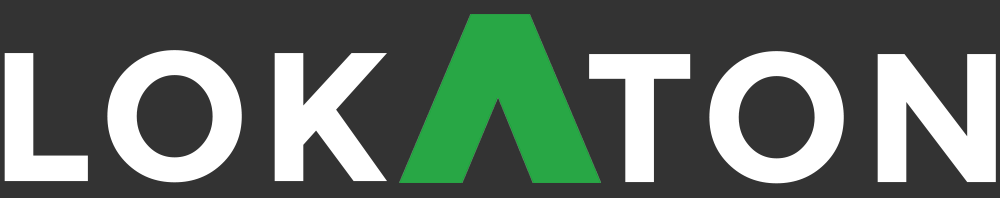
<style>
.page{position:relative;width:1000px;height:198px;background:#333333}
.page>*{position:absolute;margin:0}
.t1{font:183.3px "Montserrat-Bold";letter-spacing:0.05em;color:#ffffff;text-transform:uppercase}
</style>
<div class="page">
<p class="t1" style="left:4px;top:50px;width:383px;height:133px">LOK</p>
<p class="t1" style="left:589px;top:51px;width:407px;height:133px">ton</p>
</div>
